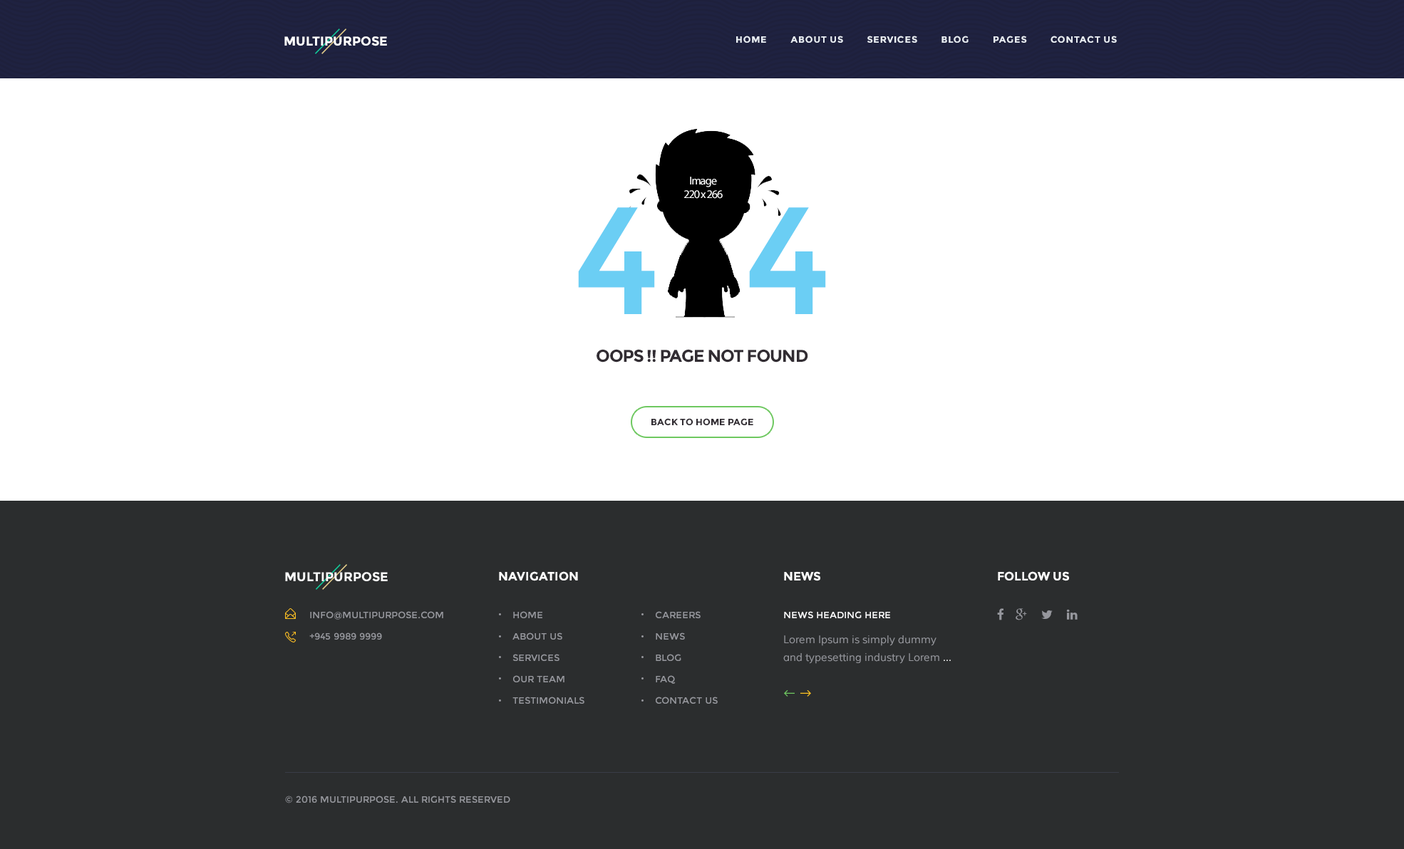
<style>
.page{position:relative;width:1404px;height:849px;background:#ffffff}
.page>*{position:absolute;margin:0}
.t1{font:12.8px "Montserrat-Bold";color:#ffffff;text-transform:uppercase}
.t2{font:9.3px "Montserrat-Bold";letter-spacing:0.05em;color:#e8edf3;text-transform:uppercase}
.t3{font:11.4px "MyriadPro-Regular";letter-spacing:-0.05em;color:#ffffff}
.t4{font:17.1px "Montserrat-Bold";letter-spacing:-0.05em;color:#312c32;text-transform:uppercase}
.t5{font:9.3px "Montserrat-Bold";color:#312c32;text-transform:uppercase}
.t6{font:12.1px "Montserrat-Bold";color:#ffffff;text-transform:uppercase}
.t7{font:9.3px/21.4px "Montserrat-Regular";color:#96979d;text-transform:uppercase}
.t8{font:9.3px "Montserrat-Regular";color:#fefeff;text-transform:uppercase}
.t9{font:10.7px/17.8px "Muli";color:#96979d}
.t10{font:10.7px/17.8px "Muli";color:#ffffff}
.t11{font:9.3px "Montserrat-Regular";color:#96979d;text-transform:uppercase}
</style>
<div class="page">
<p class="t1" style="left:284px;top:36px;width:103px;height:10px">Multipurpose</p>
<p class="t2" style="left:736px;top:36px;width:381px;height:7px">Home         about us         services         blog         pages         contact us</p>
<p class="t3" style="left:684px;top:177px;width:39px;height:22px;text-align:center">Image<br>220 x 266</p>
<p class="t4" style="left:596px;top:349px;width:212px;height:14px">oops !! page not found</p>
<p class="t5" style="left:651px;top:418px;width:102px;height:7px">Back to home page</p>
<p class="t6" style="left:499px;top:572px;width:79px;height:9px">navigation</p>
<p class="t6" style="left:784px;top:572px;width:36px;height:9px">news</p>
<p class="t6" style="left:998px;top:572px;width:71px;height:9px">Follow us</p>
<p class="t7" style="left:309px;top:611px;width:134px;height:29px">info@multipurpose.com<br>+945 9989 9999</p>
<p class="t7" style="left:512px;top:611px;width:72px;height:93px">Home<br>about us<br>services<br>our team<br>testimonials</p>
<p class="t7" style="left:656px;top:611px;width:62px;height:93px">careers<br>news<br>blog<br>faq<br>contact us</p>
<p class="t8" style="left:784px;top:611px;width:106px;height:8px">news heading here</p>
<p class="t9" style="left:783px;top:636px;width:168px;height:28px">Lorem Ipsum is simply dummy<br>and typesetting industry Lorem <span class="t10">...</span></p>
<p class="t11" style="left:285px;top:796px;width:225px;height:8px">© 2016 multipurpose. All rights reserved</p>
</div>
